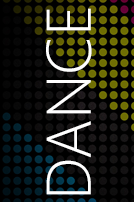
<style>
.page{position:relative;width:134px;height:202px;background:#000000}
.page>*{position:absolute;margin:0}
.t1{font:63px "SegoeUI-Light";color:#ffffff}
</style>
<div class="page">
<p class="t1" style="left:46px;top:8px;width:46px;height:187px;rotate:-90deg">DANCE</p>
</div>
